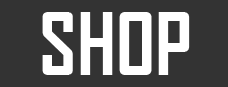
<style>
.page{position:relative;width:228px;height:87px;background:#333333}
.page>*{position:absolute;margin:0}
.t1{font:82px "AgencyFB-Bold";color:#ffffff}
</style>
<div class="page">
<p class="t1" style="left:42px;top:12px;width:148px;height:63px">SHOP</p>
</div>
